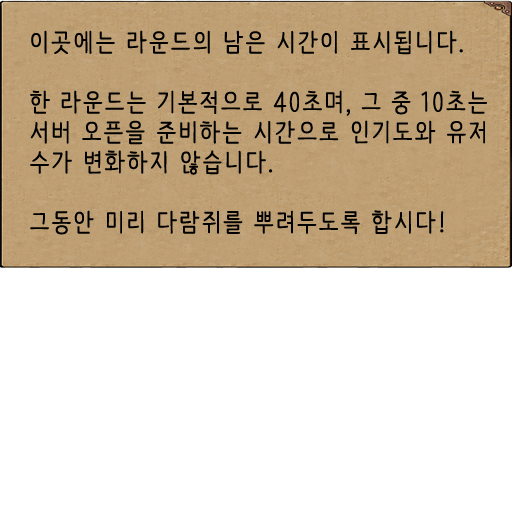
<style>
.page{position:relative;width:512px;height:512px;background:#ffffff}
.page>*{position:absolute;margin:0}
.t1{font:25px "NanumBarunpen";letter-spacing:0.075em;color:#000000;font-weight:bold}
</style>
<div class="page">
<p class="t1" style="left:30px;top:30px;width:457px;height:205px;text-align:justify">이곳에는 라운드의 남은 시간이 표시됩니다.<br> <br>한 라운드는 기본적으로 40초며, 그 중 10초는 서버 오픈을 준비하는 시간으로 인기도와 유저 수가 변화하지 않습니다.<br><br>그동안 미리 다람쥐를 뿌려두도록 합시다!</p>
</div>
